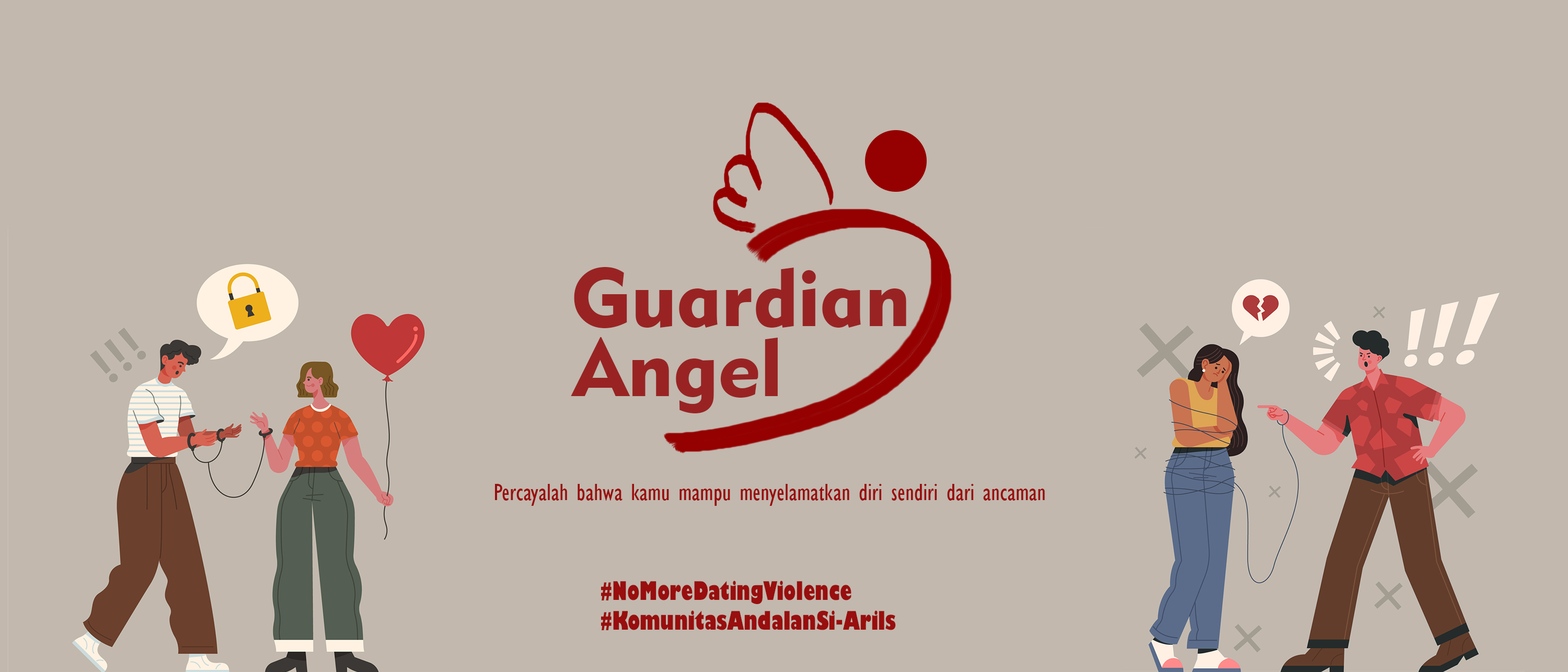
<style>
.page{position:relative;width:1568px;height:672px;background:#c2b8ae}
.page>*{position:absolute;margin:0}
.t1{font:81.5px "Geometric415BT-BlackA";color:#992323}
.t2{font:24.6px "GillSansMT-Condensed";color:#990e0e}
.t3{font:25.1px "GillSans-UltraBoldCondensed";color:#990e0e}
</style>
<div class="page">
<p class="t1" style="left:574px;top:267px;width:332px;height:61px">Guardian</p>
<p class="t1" style="left:571px;top:337px;width:207px;height:76px">Angel</p>
<p class="t2" style="left:495px;top:484px;width:550px;height:22px">Percayalah bahwa kamu mampu menyelamatkan diri sendiri dari ancaman</p>
<p class="t3" style="left:601px;top:581px;width:295px;height:49px">#NoMoreDatingViolence<br>#KomunitasAndalanSi-Arils</p>
</div>
